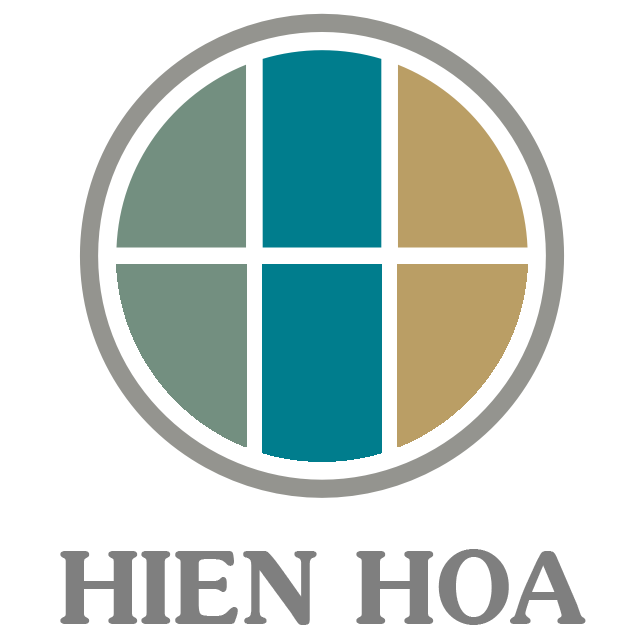
<style>
.page{position:relative;width:635px;height:635px;background:#ffffff}
.page>*{position:absolute;margin:0}
.t1{font:100px "VNI-Souvir-Bold";color:#7f7f7f;text-transform:uppercase}
</style>
<div class="page">
<p class="t1" style="left:60px;top:549px;width:526px;height:76px">hien hoa</p>
</div>
